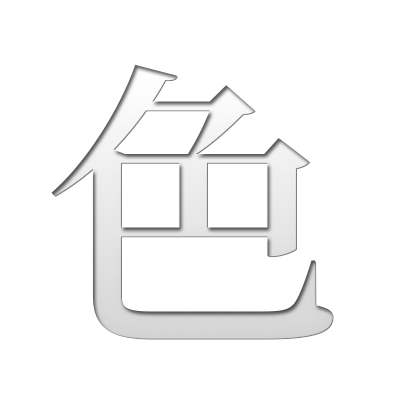
<style>
.page{position:relative;width:400px;height:400px;background:#ffffff}
.page>*{position:absolute;margin:0}
.t1{font:300px "SourceHanSerifTC-SemiBold"}
</style>
<div class="page">
<p class="t1" style="left:51px;top:64px;width:282px;height:275px">色</p>
</div>
